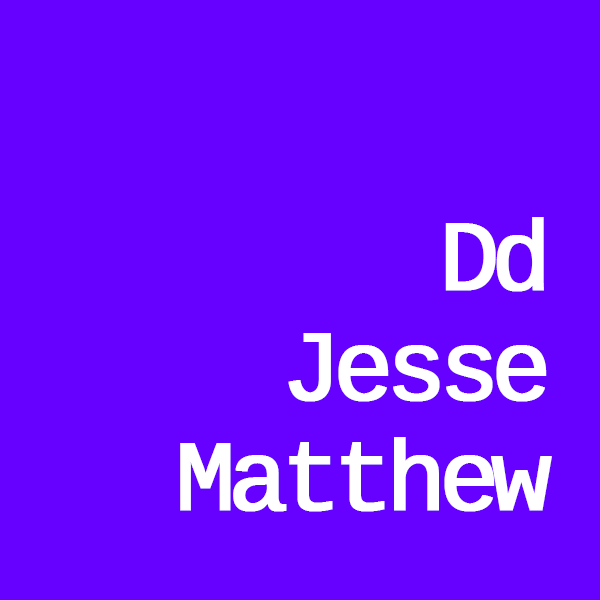
<style>
.page{position:relative;width:600px;height:600px;background:#6600ff}
.page>*{position:absolute;margin:0}
.t1{font:100px/110px "CousineForPowerline";letter-spacing:-0.1em;color:#ffffff;font-weight:bold}
</style>
<div class="page">
<p class="t1" style="left:180px;top:217px;width:372px;height:295px;text-align:right">Dd<br>Jesse<br>Matthew</p>
</div>
